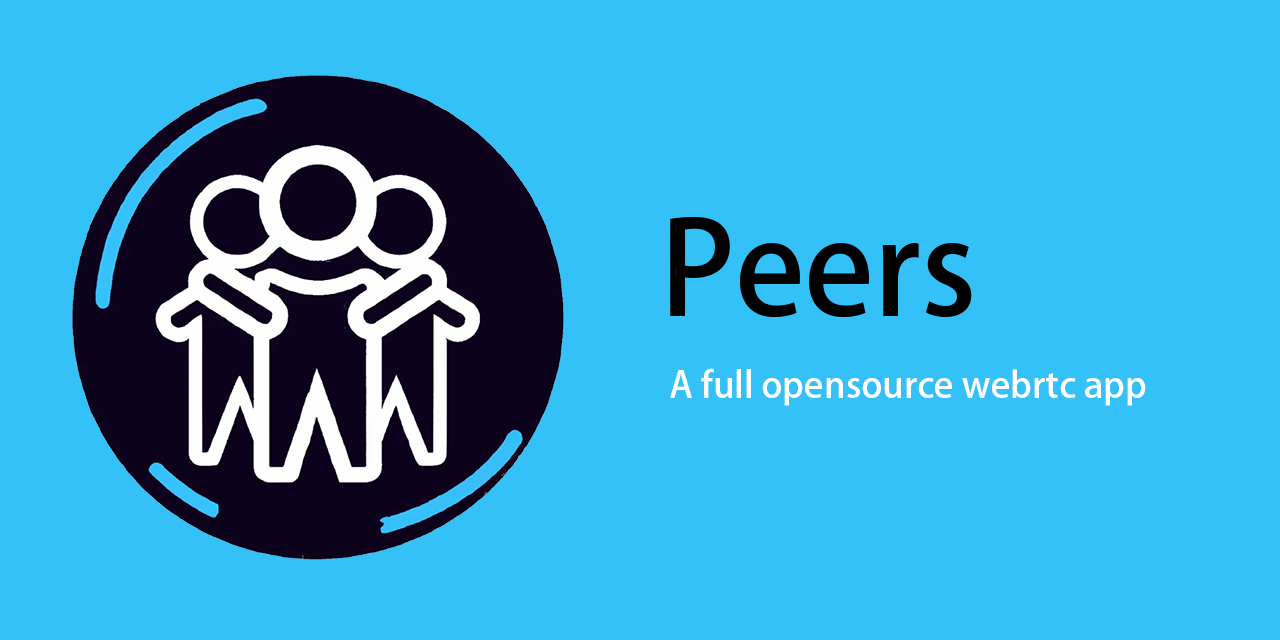
<style>
.page{position:relative;width:1280px;height:640px;background:#34c1f8}
.page>*{position:absolute;margin:0}
.t1{font:36px "AdobeHeitiStd-Regular";color:#ffffff}
</style>
<div class="page">
<p class="t1" style="left:670px;top:368px;width:476px;height:38px">A full opensource webrtc app</p>
</div>
